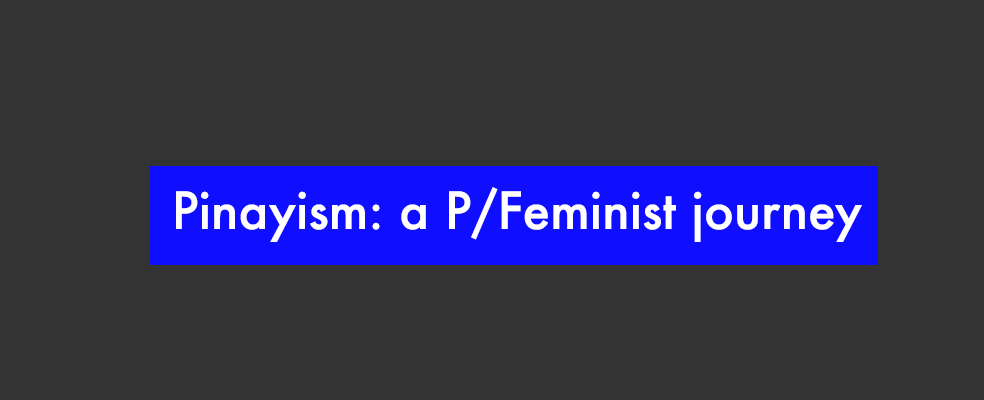
<style>
.page{position:relative;width:984px;height:400px;background:#333333}
.page>*{position:absolute;margin:0}
.t1{font:50px "Futura-Medium";color:#ffffff}
</style>
<div class="page">
<p class="t1" style="left:176px;top:187px;width:686px;height:55px">Pinayism: a P/Feminist journey</p>
</div>
